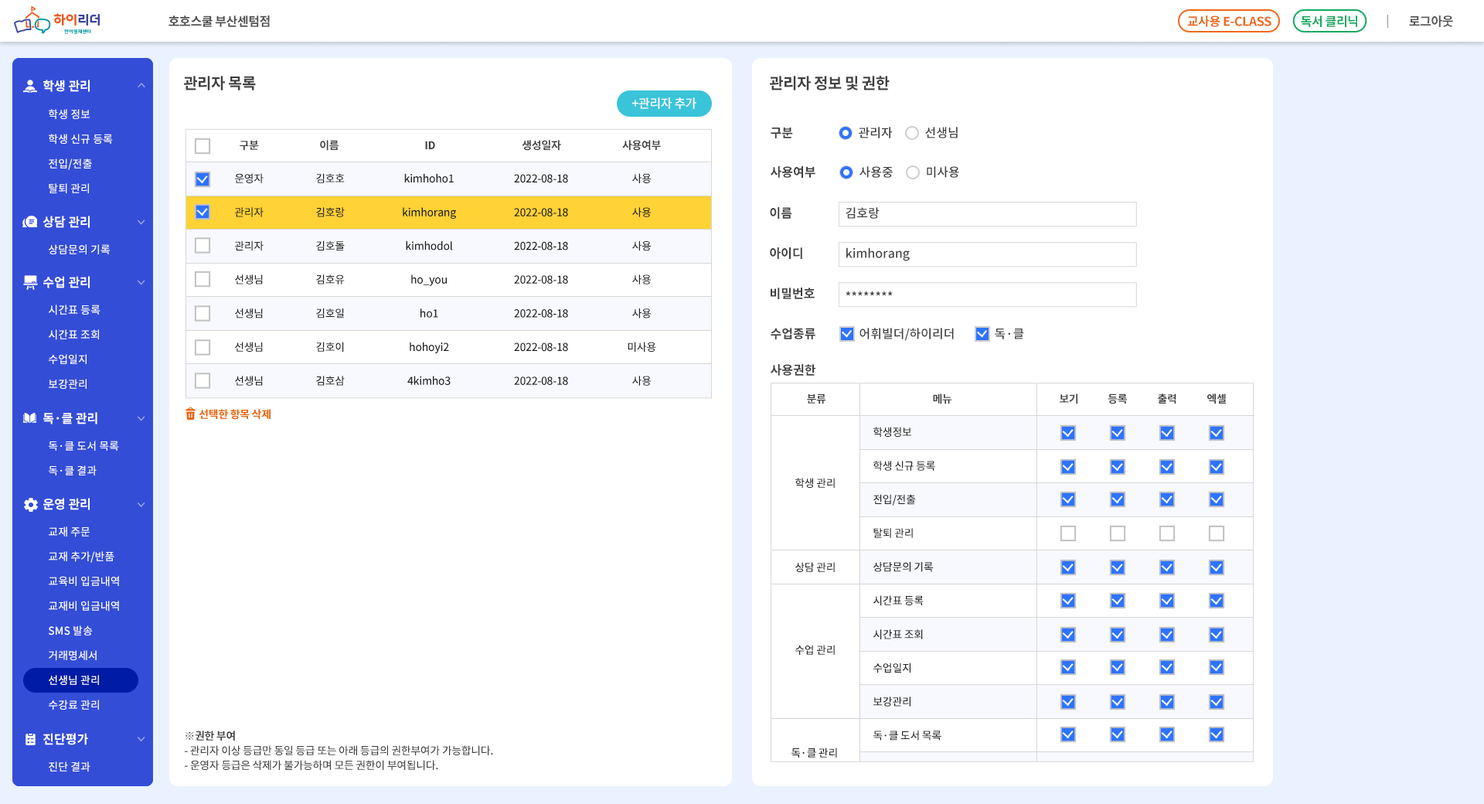
<style>
.page{position:relative;width:1484px;height:804px;background:#ffffff}
.page>*{position:absolute;margin:0}
.t1{font:12.4px "NotoSansCJKkr-Bold";letter-spacing:-0.025em;color:#4d4d4d}
.t2{font:12.4px "NotoSansCJKkr-Bold";letter-spacing:-0.025em;color:#ed6a1a}
.t3{font:12.4px "NotoSansCJKkr-Bold";letter-spacing:-0.025em;color:#13a961}
.t4{font:12.4px "NotoSansCJKkr-Bold";letter-spacing:-0.025em;color:#565656}
.t5{font:15.5px "NotoSansCJKkr-Bold";letter-spacing:-0.025em;color:#404040}
.t6{font:12.4px "NotoSansCJKkr-Bold";color:#ffffff}
.t7{font:12.4px "NotoSansCJKkr-Medium";letter-spacing:-0.025em;color:#ffffff}
.t8{font:10.8px/24.7px "NotoSansCJKkr-Medium";color:#ffffff}
.t9{font:12.4px "NotoSansCJKkr-Bold";color:#414040}
.t10{font:12.4px "NotoSansCJKkr-Medium";color:#414040}
.t11{font:10.8px "NotoSansCJKkr-Bold";letter-spacing:-0.025em;color:#404040}
.t12{font:10.8px/33.7px "NotoSansCJKkr-Medium";letter-spacing:-0.025em;color:#212121}
.t13{font:10.8px "NotoSansCJKkr-Medium";color:#ffffff}
.t14{font:10.8px "NotoSansCJKkr-Bold";letter-spacing:-0.025em;color:#ea6006}
.t15{font:10.8px "NotoSansCJKkr-Medium";letter-spacing:-0.025em;color:#212121}
.t16{font:10.8px/24.7px "NotoSansCJKkr-Medium"}
.t17{font:10.8px/14.7px "NotoSansCJKkr-Medium";letter-spacing:-0.025em;color:#404040}
.t18{font:10.8px/14.7px "NotoSansCJKkr-Bold";letter-spacing:-0.025em;color:#404040}
</style>
<div class="page">
<p class="t1" style="left:168px;top:15px;width:102px;height:12px">호호스쿨 부산센텀점</p>
<p class="t1" style="left:168px;top:15px;width:102px;height:12px">호호스쿨 부산센텀점</p>
<p class="t2" style="left:1187px;top:15px;width:84px;height:12px">교사용 E-CLASS</p>
<p class="t2" style="left:1187px;top:15px;width:84px;height:12px">교사용 E-CLASS</p>
<p class="t3" style="left:1301px;top:15px;width:56px;height:12px">독서 클리닉</p>
<p class="t3" style="left:1301px;top:15px;width:56px;height:12px">독서 클리닉</p>
<p class="t4" style="left:1409px;top:15px;width:44px;height:12px">로그아웃</p>
<p class="t4" style="left:1409px;top:15px;width:44px;height:12px">로그아웃</p>
<p class="t5" style="left:184px;top:76px;width:72px;height:14px">관리자 목록</p>
<p class="t5" style="left:770px;top:76px;width:119px;height:14px">관리자 정보 및 권한</p>
<p class="t6" style="left:43px;top:80px;width:47px;height:12px">학생 관리</p>
<p class="t6" style="left:43px;top:80px;width:47px;height:12px">학생 관리</p>
<p class="t7" style="left:632px;top:97px;width:64px;height:12px">+관리자 추가</p>
<p class="t8" style="left:49px;top:109px;width:64px;height:84px">학생 정보<br>학생 신규 등록<br>전입/전출<br>탈퇴 관리</p>
<p class="t8" style="left:49px;top:109px;width:64px;height:84px">학생 정보<br>학생 신규 등록<br>전입/전출<br>탈퇴 관리</p>
<p class="t9" style="left:770px;top:127px;width:23px;height:11px">구분</p>
<p class="t10" style="left:859px;top:127px;width:34px;height:11px">관리자</p>
<p class="t10" style="left:925px;top:127px;width:32px;height:11px">선생님</p>
<p class="t11" style="left:240px;top:140px;width:19px;height:11px">구분</p>
<p class="t11" style="left:320px;top:140px;width:18px;height:11px">이름</p>
<p class="t11" style="left:425px;top:141px;width:10px;height:8px">ID</p>
<p class="t11" style="left:522px;top:140px;width:39px;height:11px">생성일자</p>
<p class="t11" style="left:622px;top:140px;width:39px;height:11px">사용여부</p>
<p class="t12" style="left:235px;top:173px;width:29px;height:213px;text-align:center">운영자<br>관리자<br>관리자<br>선생님<br>선생님<br>선생님<br>선생님</p>
<p class="t12" style="left:316px;top:173px;width:29px;height:213px;text-align:center">김호호<br>김호랑<br>김호돌<br>김호유<br>김호일<br>김호이<br>김호삼</p>
<p class="t12" style="left:403px;top:173px;width:53px;height:212px;text-align:center">kimhoho1<br>kimhorang<br>kimhodol<br>ho_you<br>ho1<br>hohoyi2<br>4kimho3</p>
<p class="t12" style="left:514px;top:174px;width:54px;height:211px;text-align:center">2022-08-18<br>2022-08-18<br>2022-08-18<br>2022-08-18<br>2022-08-18<br>2022-08-18<br>2022-08-18</p>
<p class="t12" style="left:627px;top:173px;width:29px;height:213px;text-align:center">사용<br>사용<br>사용<br>사용<br>사용<br>미사용<br>사용</p>
<p class="t9" style="left:770px;top:166px;width:45px;height:12px">사용여부</p>
<p class="t10" style="left:859px;top:166px;width:34px;height:12px">사용중</p>
<p class="t10" style="left:927px;top:166px;width:32px;height:12px">미사용</p>
<p class="t9" style="left:770px;top:207px;width:22px;height:12px">이름</p>
<p class="t10" style="left:845px;top:207px;width:34px;height:12px">김호랑</p>
<p class="t6" style="left:43px;top:216px;width:47px;height:12px">상담 관리</p>
<p class="t6" style="left:43px;top:216px;width:47px;height:12px">상담 관리</p>
<p class="t13" style="left:49px;top:244px;width:61px;height:10px">상담문의 기록</p>
<p class="t13" style="left:49px;top:244px;width:61px;height:10px">상담문의 기록</p>
<p class="t9" style="left:770px;top:247px;width:32px;height:12px">아이디</p>
<p class="t10" style="left:846px;top:247px;width:64px;height:14px">kimhorang</p>
<p class="t6" style="left:43px;top:276px;width:47px;height:12px">수업 관리</p>
<p class="t6" style="left:43px;top:276px;width:47px;height:12px">수업 관리</p>
<p class="t9" style="left:770px;top:287px;width:44px;height:12px">비밀번호</p>
<p class="t10" style="left:845px;top:291px;width:48px;height:5px">********</p>
<p class="t8" style="left:49px;top:304px;width:51px;height:85px">시간표 등록<br>시간표 조회<br>수업일지<br>보강관리</p>
<p class="t8" style="left:49px;top:304px;width:51px;height:85px">시간표 등록<br>시간표 조회<br>수업일지<br>보강관리</p>
<p class="t9" style="left:770px;top:328px;width:45px;height:11px">수업종류</p>
<p class="t10" style="left:859px;top:328px;width:95px;height:13px">어휘빌더/하이리더</p>
<p class="t10" style="left:995px;top:328px;width:29px;height:11px">독·클</p>
<p class="t9" style="left:770px;top:364px;width:45px;height:12px">사용권한</p>
<p class="t11" style="left:807px;top:393px;width:19px;height:11px">분류</p>
<p class="t11" style="left:933px;top:393px;width:19px;height:11px">메뉴</p>
<p class="t11" style="left:1059px;top:393px;width:18px;height:10px">보기</p>
<p class="t11" style="left:1107px;top:393px;width:20px;height:11px">등록</p>
<p class="t11" style="left:1158px;top:393px;width:18px;height:11px">출력</p>
<p class="t11" style="left:1207px;top:393px;width:19px;height:11px">엑셀</p>
<p class="t6" style="left:43px;top:412px;width:54px;height:12px">독·클 관리</p>
<p class="t6" style="left:43px;top:412px;width:54px;height:12px">독·클 관리</p>
<p class="t14" style="left:199px;top:409px;width:71px;height:11px">선택한 항목 삭제</p>
<p class="t12" style="left:873px;top:427px;width:68px;height:313px">학생정보<br>학생 신규 등록<br>전입/전출<br>탈퇴 관리<br>상담문의 기록<br>시간표 등록<br>시간표 조회<br>수업일지<br>보강관리<br>독·클 도서 목록</p>
<p class="t8" style="left:49px;top:440px;width:70px;height:35px">독·클 도서 목록<br>독·클 결과</p>
<p class="t8" style="left:49px;top:440px;width:70px;height:35px">독·클 도서 목록<br>독·클 결과</p>
<p class="t15" style="left:795px;top:478px;width:40px;height:10px">학생 관리</p>
<p class="t6" style="left:43px;top:498px;width:47px;height:12px">운영 관리</p>
<p class="t6" style="left:43px;top:498px;width:47px;height:12px">운영 관리</p>
<p class="t16" style="left:49px;top:526px;width:70px;height:159px">교재 주문<br>교육비 입금내역<br>교재비 입금내역<br>SMS 발송<br>거래명세서<br>관리자 설정<br>수강료 관리</p>
<p class="t8" style="left:49px;top:526px;width:70px;height:183px">교재 주문<br>교재 추가/반품<br>교육비 입금내역<br>교재비 입금내역<br>SMS 발송<br>거래명세서<br>선생님 관리<br>수강료 관리</p>
<p class="t15" style="left:795px;top:562px;width:40px;height:10px">상담 관리</p>
<p class="t15" style="left:795px;top:644px;width:40px;height:11px">수업 관리</p>
<p class="t6" style="left:43px;top:733px;width:45px;height:12px">진단평가</p>
<p class="t17" style="left:185px;top:730px;width:308px;height:40px"><span class="t18">※권한 부여<br></span>- 관리자 이상 등급만 동일 등급 또는 아래 등급의 권한부여가 가능합니다. <br>- 운영자 등급은 삭제가 불가능하며 모든 권한이 부여됩니다.</p>
<p class="t15" style="left:791px;top:747px;width:46px;height:10px">독·클 관리</p>
<p class="t13" style="left:49px;top:761px;width:41px;height:10px">진단 결과</p>
</div>
